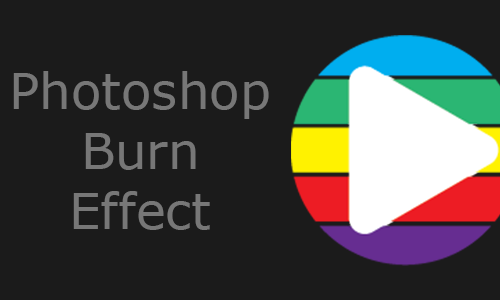
<style>
.page{position:relative;width:500px;height:300px;background:#1b1b1b}
.page>*{position:absolute;margin:0}
.t1{font:50px "Verdana";color:#777777}
</style>
<div class="page">
<p class="t1" style="left:13px;top:71px;width:256px;height:159px;text-align:center">Photoshop<br>Burn<br>Effect</p>
</div>
